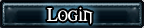
<style>
.page{position:relative;width:144px;height:28px}
.page>*{position:absolute;margin:0}
.t1{font:17px "Morpheus";color:#ffffff;scale:1.1 1}
</style>
<div class="page">
<p class="t1" style="left:47px;top:7px;width:46px;height:18px">Login</p>
</div>
